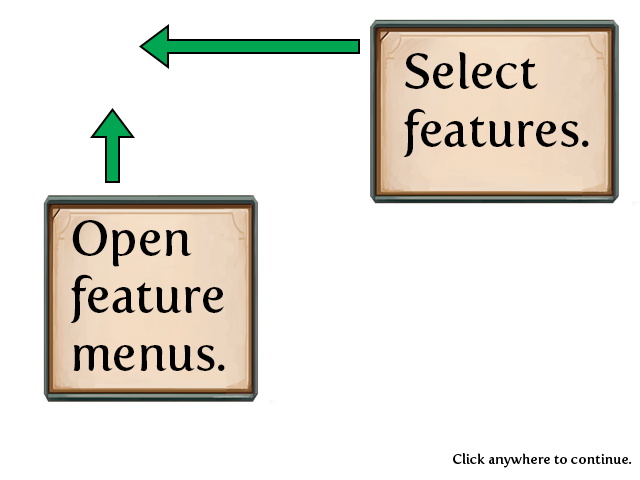
<style>
.page{position:relative;width:640px;height:480px;background:#ffffff}
.page>*{position:absolute;margin:0}
.t1{font:48px "FertigoPro-Regular";color:#000000}
.t2{font:14px "FertigoPro-Regular";color:#000000}
</style>
<div class="page">
<p class="t1" style="left:403px;top:52px;width:186px;height:105px">Select<br>features.</p>
<p class="t1" style="left:70px;top:220px;width:155px;height:151px">Open <br>feature<br>menus.</p>
<p class="t2" style="left:453px;top:453px;width:179px;height:15px">Click anywhere to continue.</p>
</div>
